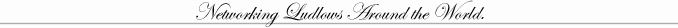
<style>
.page{position:relative;width:678px;height:28px;background:#fefdfd}
.page>*{position:absolute;margin:0}
.t1{font:24px "EdwardianScriptITC";color:#000000}
</style>
<div class="page">
<p class="t1" style="left:196px;top:0px;width:289px;height:27px">Networking Ludlows Around the World.</p>
</div>
